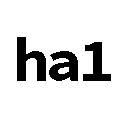
<style>
.page{position:relative;width:128px;height:128px;background:#ffffff}
.page>*{position:absolute;margin:0}
.t1{font:60.5px "SourceCodePro-Bold";letter-spacing:-0.06em;color:#000000}
</style>
<div class="page">
<p class="t1" style="left:17px;top:37px;width:94px;height:44px">ha1</p>
</div>
